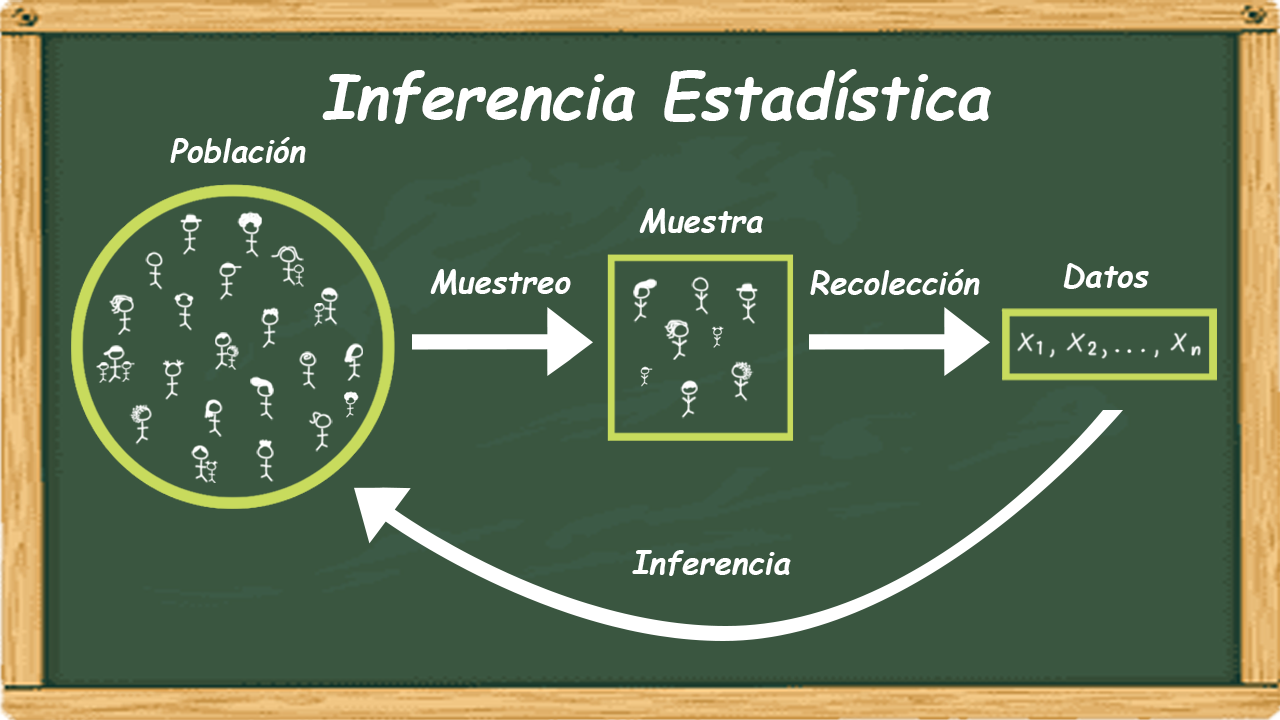
<style>
.page{position:relative;width:1280px;height:720px;background:#3a5640}
.page>*{position:absolute;margin:0}
.t1{font:62px "ComicSansMS-Bold";color:#ffffff;font-style:italic}
.t2{font:31.4px "ComicSansMS-Bold";color:#ffffff;font-style:italic}
</style>
<div class="page">
<p class="t1" style="left:322px;top:69px;width:669px;height:55px">Inferencia Estadística</p>
<p class="t2" style="left:170px;top:137px;width:136px;height:26px">Población</p>
<p class="t2" style="left:639px;top:208px;width:124px;height:26px">Muestra</p>
<p class="t2" style="left:430px;top:269px;width:141px;height:26px">Muestreo</p>
<p class="t2" style="left:810px;top:269px;width:170px;height:26px">Recolección</p>
<p class="t2" style="left:1063px;top:263px;width:86px;height:26px">Datos</p>
<p class="t2" style="left:632px;top:550px;width:159px;height:26px">Inferencia</p>
</div>
